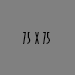
<style>
.page{position:relative;width:75px;height:75px;background:#808080}
.page>*{position:absolute;margin:0}
.t1{font:16px "Blakely-Light";color:#000000}
</style>
<div class="page">
<p class="t1" style="left:23px;top:32px;width:27px;height:12px">75 x 75</p>
</div>
